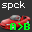
<style>
.page{position:relative;width:32px;height:32px;background:#333333}
.page>*{position:absolute;margin:0}
.t1{font:9px "Monaco";letter-spacing:0.06em;color:#ffffff}
.t2{font:9px "Monaco";letter-spacing:0.14em;color:#00ff18;font-weight:bold}
</style>
<div class="page">
<p class="t1" style="left:2px;top:1px;width:23px;height:9px">spck</p>
<p class="t2" style="left:10px;top:23px;width:20px;height:7px">A&gt;B</p>
</div>
